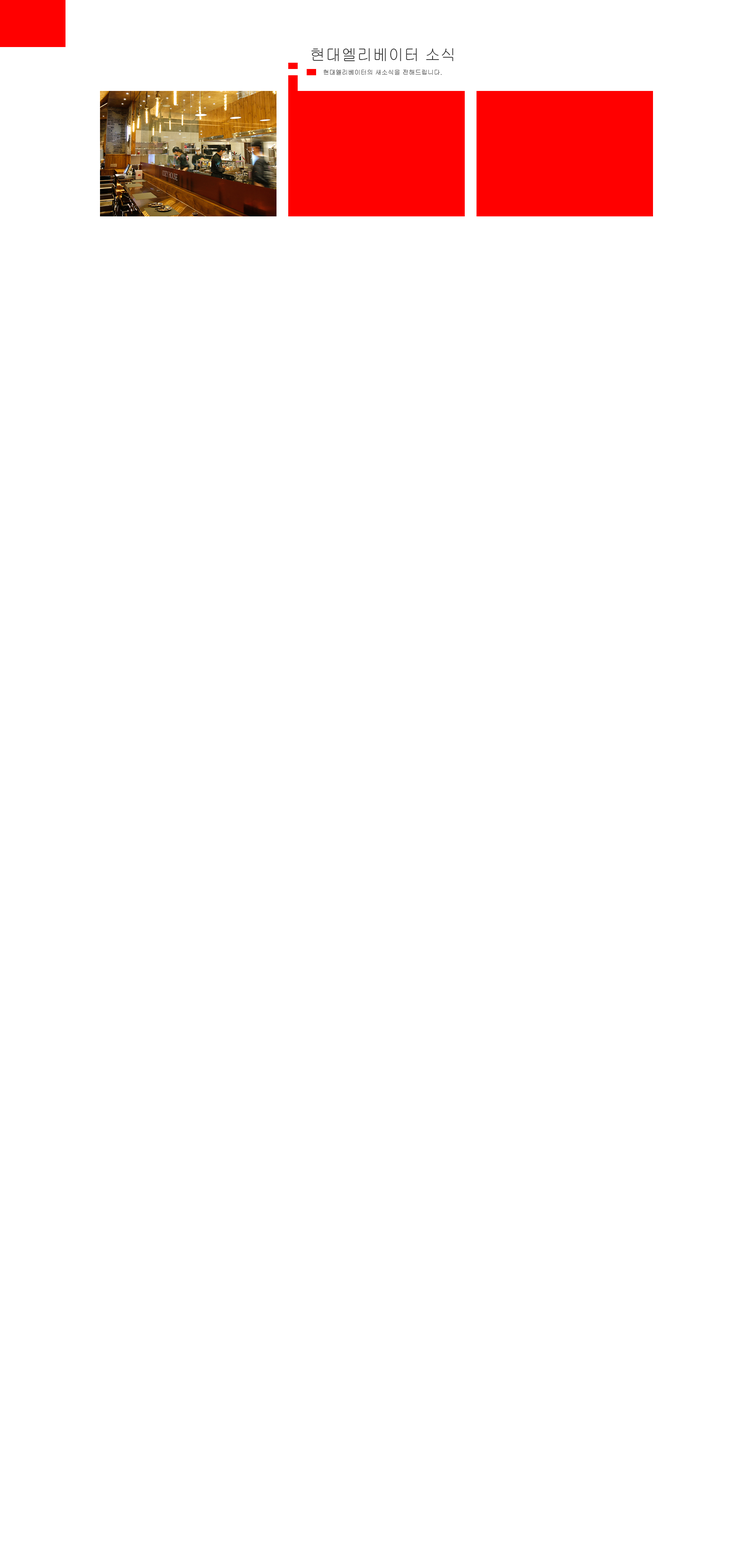
<style>
.page{position:relative;width:753px;height:1568px;background:#ffffff}
.page>*{position:absolute;margin:0}
.t1{font:15.7px "Gulim";color:#333333}
.t2{font:6.3px "Gulim";color:#333333}
</style>
<div class="page">
<p class="t1" style="left:311px;top:48px;width:142px;height:13px">현대엘리베이터 소식</p>
<p class="t2" style="left:323px;top:69px;width:118px;height:6px">현대엘리베이터의 새소식을 전해드립니다.</p>
</div>
